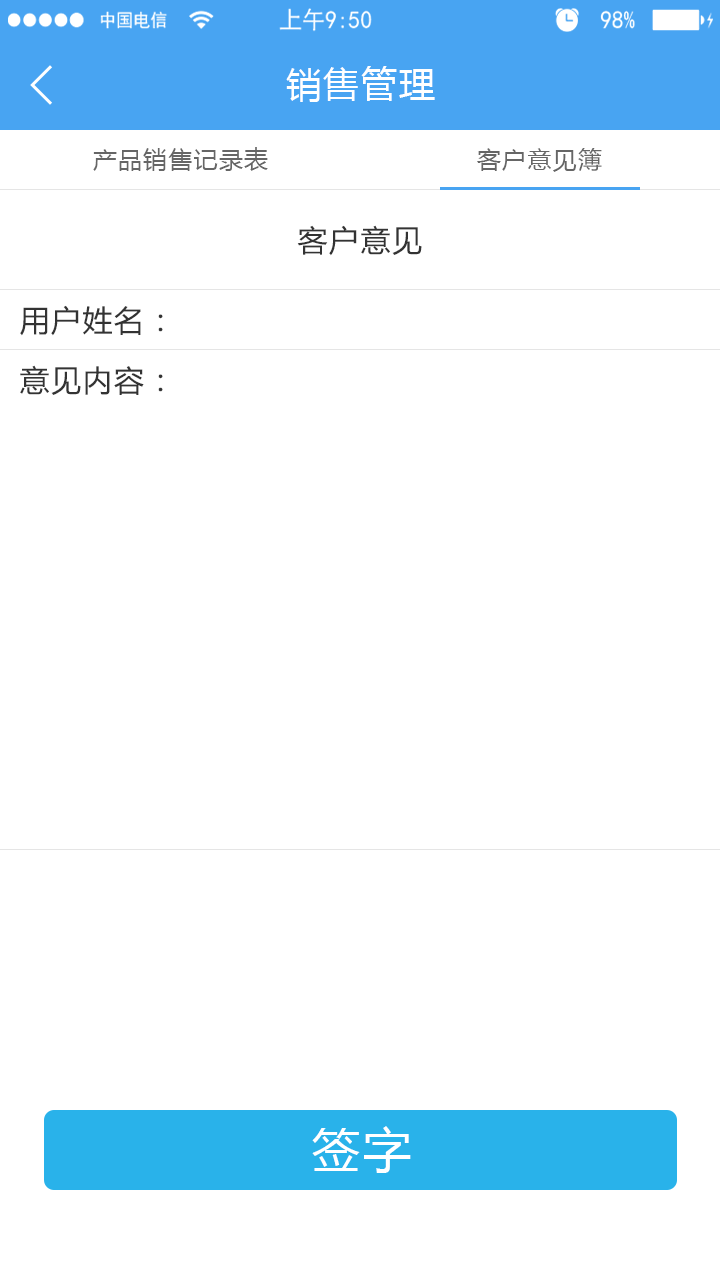
<style>
.page{position:relative;width:720px;height:1280px;background:#ffffff}
.page>*{position:absolute;margin:0}
.t1{font:36px "MicrosoftYaHei";letter-spacing:0.05em;color:#ffffff}
.t2{font:24px "MicrosoftYaHei";letter-spacing:0.05em;color:#666666}
.t3{font:30px "MicrosoftYaHei";letter-spacing:0.05em;color:#333333}
.t4{font:48px "MicrosoftYaHei";letter-spacing:0.05em;color:#ffffff}
</style>
<div class="page">
<p class="t1" style="left:286px;top:66px;width:149px;height:36px">销售管理</p>
<p class="t2" style="left:93px;top:147px;width:175px;height:24px">产品销售记录表</p>
<p class="t2" style="left:477px;top:148px;width:125px;height:24px">客户意见簿</p>
<p class="t3" style="left:297px;top:225px;width:125px;height:31px">客户意见</p>
<p class="t3" style="left:20px;top:305px;width:143px;height:31px">用户姓名：</p>
<p class="t3" style="left:20px;top:365px;width:143px;height:30px">意见内容：</p>
<p class="t4" style="left:312px;top:1126px;width:99px;height:47px">签字</p>
</div>
